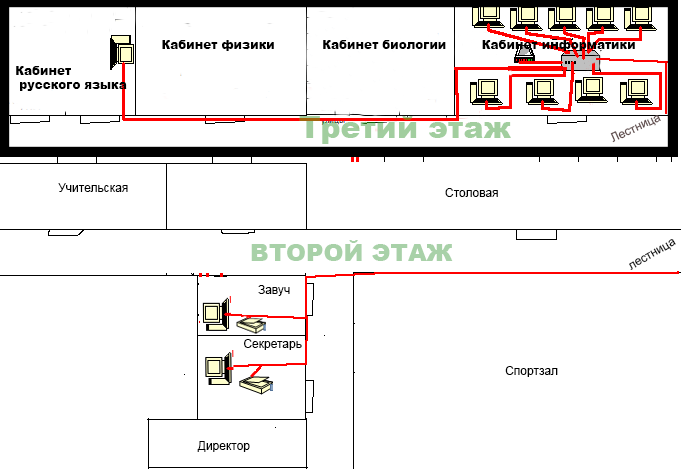
<style>
.page{position:relative;width:681px;height:469px;background:#ffffff}
.page>*{position:absolute;margin:0}
.t1{font:12px "Arial-Black";color:#000000}
.t2{font:12px/6.8px "Arial-Black";color:#000000}
.t3{font:30px "Arial-Black";color:#a2ce9f}
.t4{font:12px "ArialMT";color:#5c4848}
.t5{font:12px "ArialMT";color:#000000}
.t6{font:24px "Arial-Black";color:#a8d1a8}
</style>
<div class="page">
<p class="t1" style="left:162px;top:40px;width:112px;height:11px">Кабинет физики</p>
<p class="t1" style="left:323px;top:40px;width:123px;height:9px">Кабинет биологии</p>
<p class="t1" style="left:482px;top:40px;width:153px;height:11px">Кабинет информатики</p>
<p class="t2" style="left:16px;top:66px;width:111px;height:25px;text-align:right">Кабинет<br><br> русского языка</p>
<p class="t3" style="left:299px;top:116px;width:212px;height:28px">Третий этаж</p>
<p class="t4" style="left:610px;top:115px;width:51px;height:28px;rotate:-25deg">Лестница</p>
<p class="t5" style="left:58px;top:183px;width:70px;height:9px">Учительская</p>
<p class="t5" style="left:445px;top:188px;width:53px;height:9px">Столовая</p>
<p class="t6" style="left:251px;top:240px;width:202px;height:21px">ВТОРОЙ ЭТАЖ</p>
<p class="t5" style="left:629px;top:239px;width:47px;height:31px;rotate:-30deg">лестница</p>
<p class="t5" style="left:258px;top:285px;width:32px;height:11px">Завуч</p>
<p class="t5" style="left:244px;top:339px;width:58px;height:11px">Секретарь</p>
<p class="t5" style="left:505px;top:366px;width:53px;height:11px">Спортзал</p>
<p class="t5" style="left:197px;top:441px;width:53px;height:11px">Директор</p>
</div>
